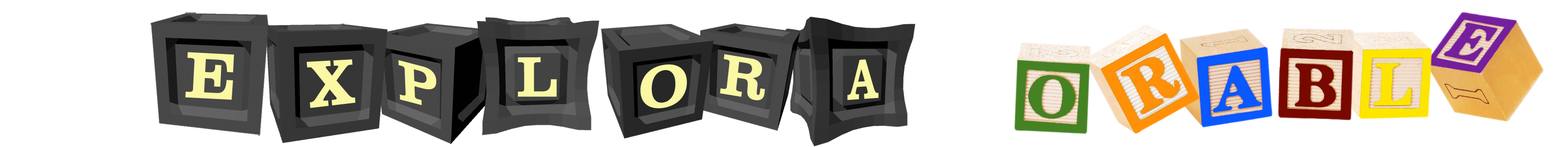
<style>
.page{position:relative;width:1568px;height:147px;background:#ffffff}
.page>*{position:absolute;margin:0}
.t1{font:67.6px "ClarendonTOT-Bold";color:#faf8a5}
.t2{font:58.8px "ClarendonTOT-Bold";color:#faf8a5;scale:0.97 1}
.t3{font:67.4px "ClarendonTOT-Bold";color:#faf8a5;scale:0.91 1}
.t4{font:58.8px "ClarendonTOT-Bold";color:#faf8a5}
.t5{font:60.6px "ClarendonTOT-Bold";color:#faf8a5;scale:1.04 1}
.t6{font:58.8px "ClarendonTOT-Bold";color:#faf8a5;scale:0.65 1}
</style>
<div class="page">
<p class="t1" style="left:185px;top:52px;width:49px;height:48px;rotate:3deg">E</p>
<p class="t2" style="left:720px;top:54px;width:45px;height:46px;rotate:9deg">R</p>
<p class="t3" style="left:307px;top:59px;width:49px;height:49px;rotate:-7deg">X</p>
<p class="t4" style="left:398px;top:60px;width:39px;height:45px;rotate:15deg">P</p>
<p class="t4" style="left:518px;top:57px;width:39px;height:40px">L</p>
<p class="t5" style="left:640px;top:64px;width:47px;height:44px;rotate:-8deg">O</p>
<p class="t6" style="left:847px;top:59px;width:32px;height:41px;rotate:-4deg">A</p>
</div>
